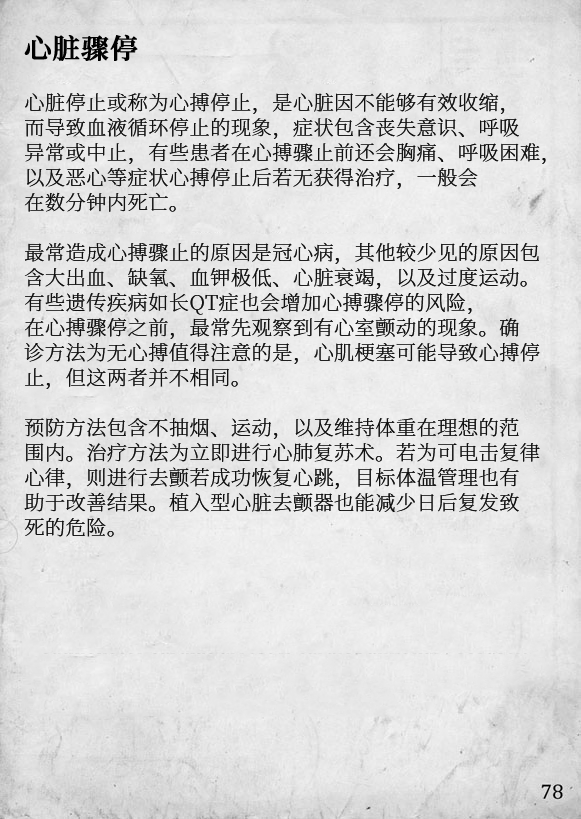
<style>
.page{position:relative;width:581px;height:819px}
.page>*{position:absolute;margin:0}
.t1{font:20.2px/25px "SourceHanSerifCN-ExtraLight";letter-spacing:0.02em;color:#111111}
.t2{font:27.2px/29px "SourceHanSerifCN-SemiBold";letter-spacing:0.02em;color:#000000;font-weight:bold}
</style>
<div class="page">
<p class="t1" style="left:24px;top:34px;width:522px;height:503px"><span class="t2">心脏骤停<br><br></span>心脏停止或称为心搏停止，是心脏因不能够有效收缩，<br>而导致血液循环停止的现象，症状包含丧失意识、呼吸<br>异常或中止，有些患者在心搏骤止前还会胸痛、呼吸困难，<br>以及恶心等症状心搏停止后若无获得治疗，一般会<br>在数分钟内死亡。<br><br>最常造成心搏骤止的原因是冠心病，其他较少见的原因包<br>含大出血、缺氧、血钾极低、心脏衰竭，以及过度运动。<br>有些遗传疾病如长QT症也会增加心搏骤停的风险，<br>在心搏骤停之前，最常先观察到有心室颤动的现象。确<br>诊方法为无心搏值得注意的是，心肌梗塞可能导致心搏停<br>止，但这两者并不相同。<br><br>预防方法包含不抽烟、运动，以及维持体重在理想的范<br>围内。治疗方法为立即进行心肺复苏术。若为可电击复律<br>心律，则进行去颤若成功恢复心跳，目标体温管理也有<br>助于改善结果。植入型心脏去颤器也能减少日后复发致<br>死的危险。</p>
</div>
